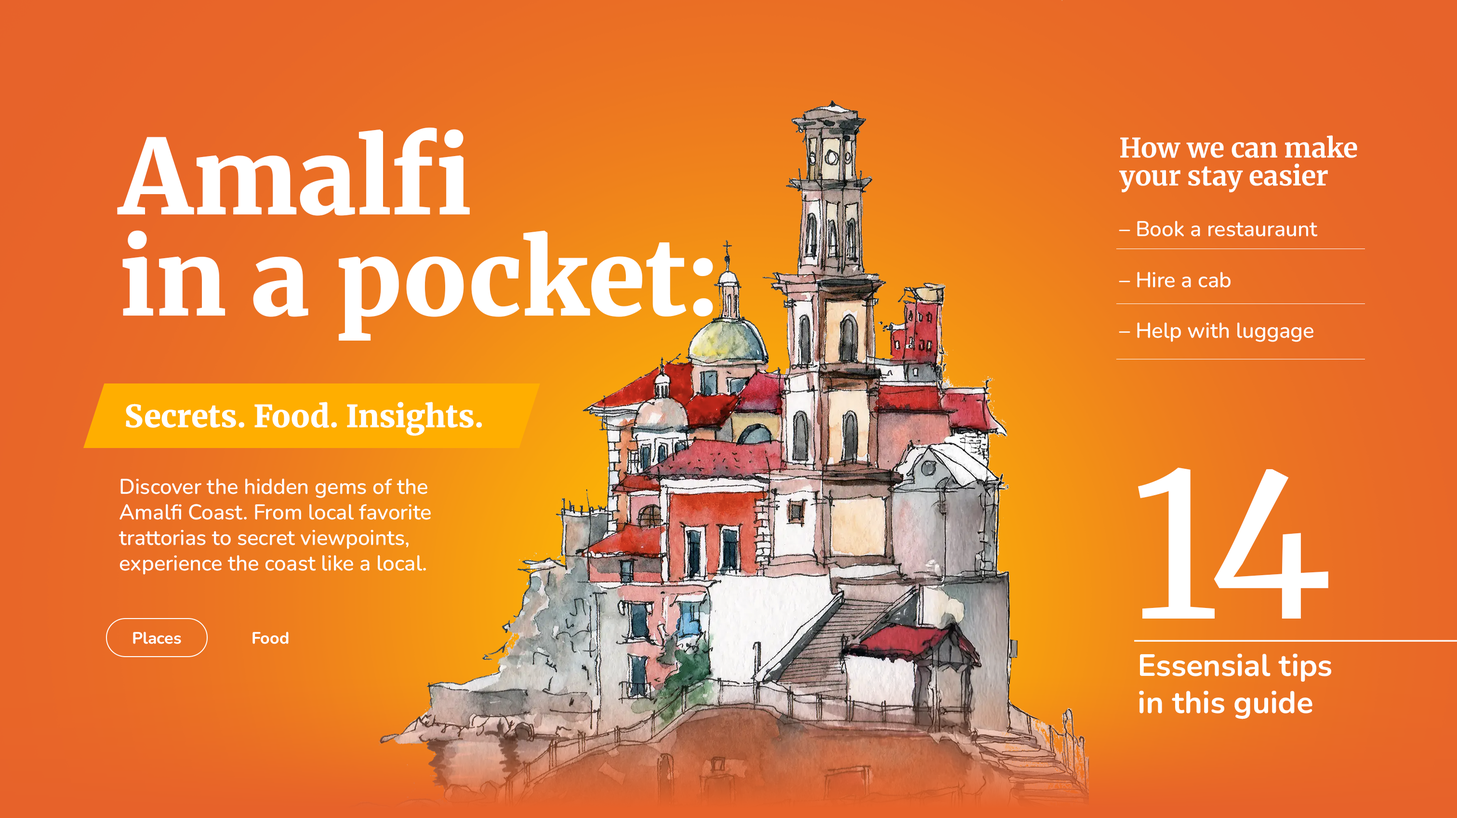
<style>
.page{position:relative;width:1457px;height:818px}
.page>*{position:absolute;margin:0}
.t1{font:103.5px/101.2px "Merriweather-Black";color:#ffffff}
.t2{font:21.2px/50.8px "Nunito-Medium";color:#ffffff}
.t3{font:27px/50.8px "Merriweather-Bold";color:#ffffff}
.t4{font:27px/28.2px "Merriweather-Bold";color:#ffffff}
.t5{font:30.8px "Merriweather-Black";color:#ffffff}
.t6{font:200.6px "Merriweather-Regular";color:#ffffff}
.t7{font:21.2px "Nunito-Medium";color:#ffffff}
.t8{font:16.4px "Nunito-Bold";color:#ffffff}
.t9{font:30.8px "Nunito-Bold";color:#ffffff}
</style>
<div class="page">
<p class="t1" style="left:117px;top:127px;width:596px;height:214px">Amalfi <br>in a pocket:</p>
<p class="t2" style="left:1119px;top:135px;width:239px;height:207px"><span class="t3">How we can make <br></span><span class="t4">your stay easier<br></span>– Book a restauraunt<br>– Hire a cab<br>– Help with luggage</p>
<p class="t5" style="left:126px;top:402px;width:356px;height:34px">Secrets. Food. Insights.</p>
<p class="t6" style="left:1138px;top:467px;width:191px;height:152px">14</p>
<p class="t7" style="left:119px;top:479px;width:312px;height:96px">Discover the hidden gems of the Amalfi Coast. From local favorite trattorias to secret viewpoints, experience the coast like a local.</p>
<p class="t8" style="left:133px;top:632px;width:48px;height:12px">Places</p>
<p class="t8" style="left:253px;top:632px;width:36px;height:12px">Food</p>
<p class="t9" style="left:1139px;top:653px;width:192px;height:66px">Essensial tips<br>in this guide</p>
</div>
